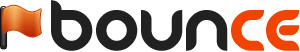
<style>
.page{position:relative;width:300px;height:52px;background:#ffffff}
.page>*{position:absolute;margin:0}
.t1{font:48px "DanubeBold";color:#212121}
.t2{font:48px "DanubeBold";color:#f14401}
</style>
<div class="page">
<p class="t1" style="left:51px;top:0px;width:249px;height:51px">Boun<span class="t2">ce</span></p>
</div>
